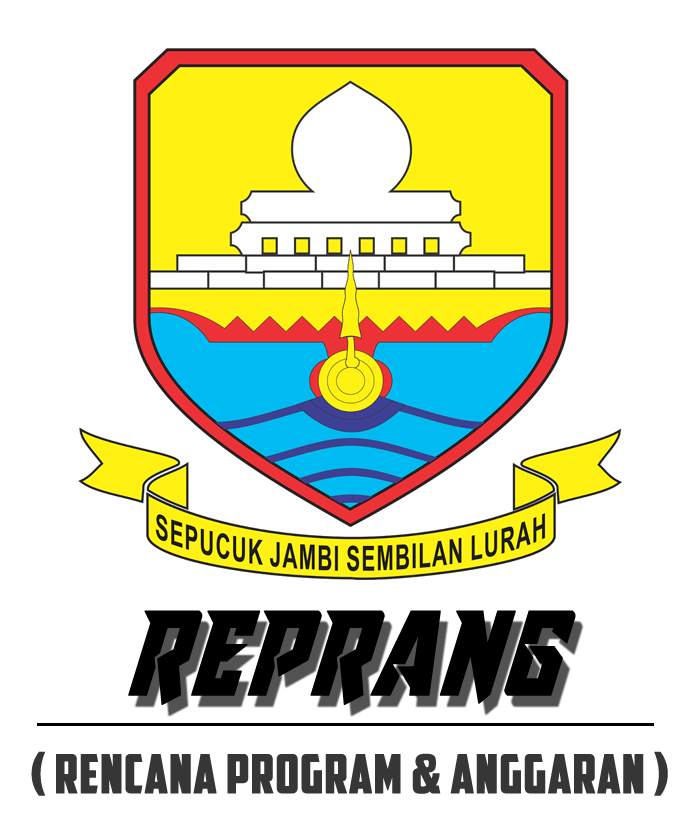
<style>
.page{position:relative;width:694px;height:823px;background:#ffffff}
.page>*{position:absolute;margin:0}
.t1{font:95.6px "RaiderCrusader";color:#000000;font-weight:bold}
.t2{font:53.6px "AmericanCaptain";color:#363637;font-weight:bold}
</style>
<div class="page">
<p class="t1" style="left:128px;top:610px;width:448px;height:95px">REPRANG</p>
<p class="t2" style="left:31px;top:751px;width:637px;height:45px">( RENCANA PROGRAM &amp; ANGGARAN )</p>
</div>
